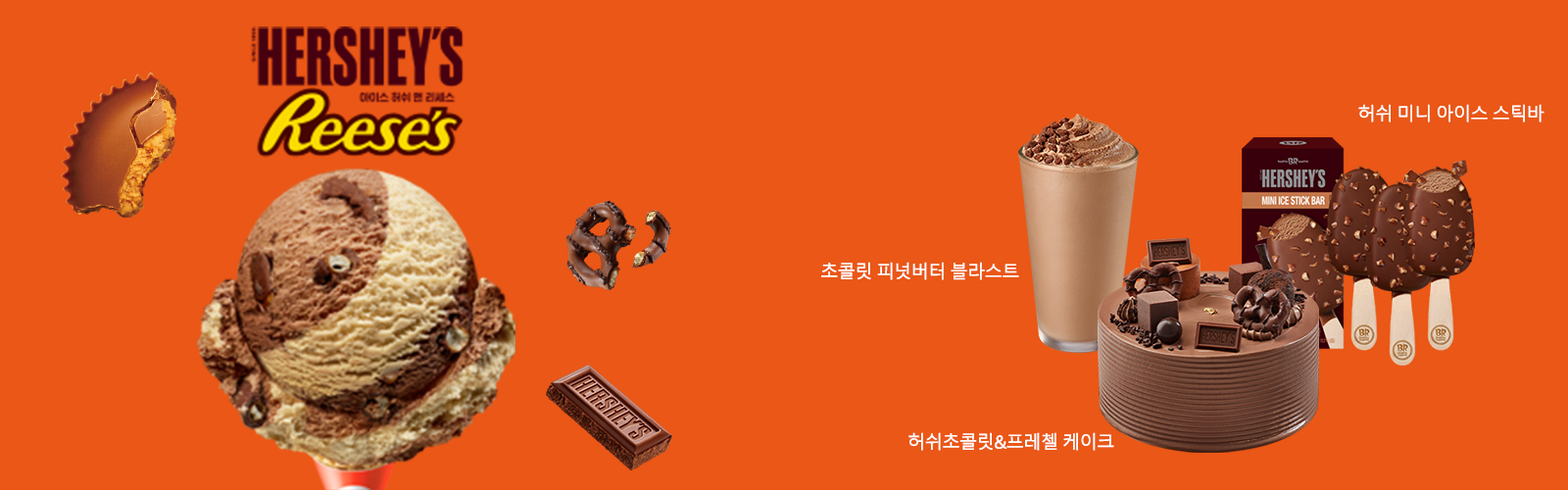
<style>
.page{position:relative;width:1568px;height:490px;background:#ea5716}
.page>*{position:absolute;margin:0}
.t1{font:17.6px "MalgunGothic-Semilight";letter-spacing:-0.05em;color:#ffffff;font-weight:bold}
</style>
<div class="page">
<p class="t1" style="left:1358px;top:104px;width:186px;height:18px">허쉬 미니 아이스 스틱바</p>
<p class="t1" style="left:821px;top:262px;width:198px;height:18px">초콜릿 피넛버터 블라스트</p>
<p class="t1" style="left:908px;top:432px;width:206px;height:19px">허쉬초콜릿&amp;프레첼 케이크</p>
</div>
